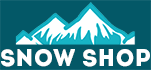
<style>
.page{position:relative;width:151px;height:70px;background:#035867}
.page>*{position:absolute;margin:0}
.t1{font:23.9px "Intro";color:#ffffff}
</style>
<div class="page">
<p class="t1" style="left:1px;top:49px;width:149px;height:18px">SNOW Shop</p>
</div>
